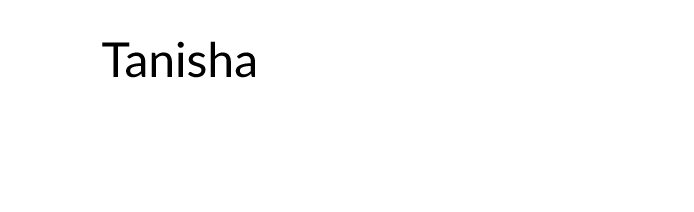
<style>
.page{position:relative;width:694px;height:212px;background:#ffffff}
.page>*{position:absolute;margin:0}
.t1{font:48px "Lato-Regular";color:#000000}
</style>
<div class="page">
<p class="t1" style="left:102px;top:41px;width:153px;height:37px">Tanisha</p>
</div>
